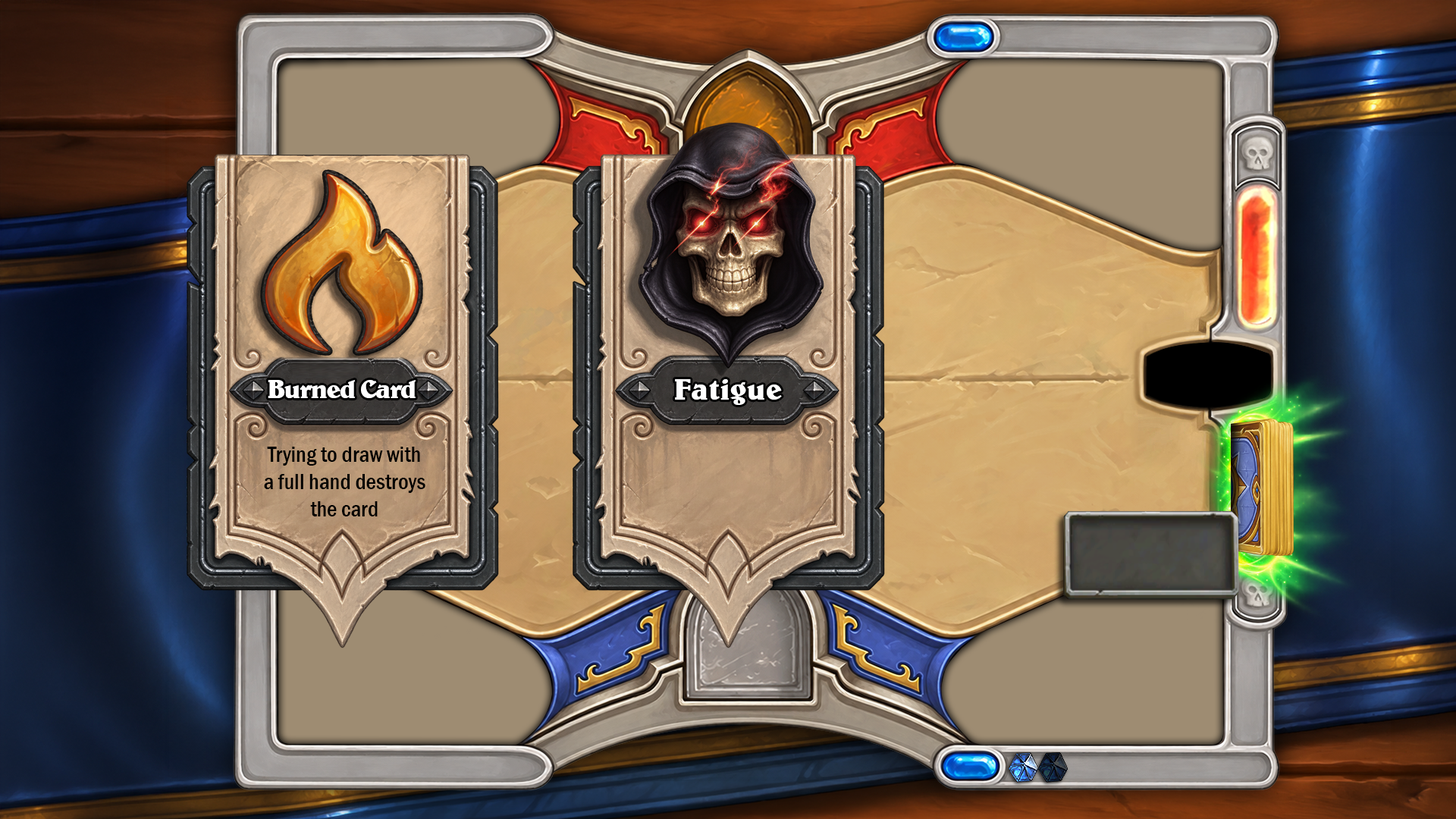
<style>
.page{position:relative;width:1456px;height:819px}
.page>*{position:absolute;margin:0}
.t1{font:26.5px "BelweBT-Bold";letter-spacing:-0.05em;color:#ffffff}
.t2{font:30.3px "BelweBT-Bold";color:#ffffff}
.t3{font:22.7px "FranklinGothic-MediumCond";color:#000000}
</style>
<div class="page">
<p class="t1" style="left:268px;top:380px;width:148px;height:18px">Burned Card</p>
<p class="t2" style="left:675px;top:379px;width:107px;height:26px">Fatigue</p>
<p class="t3" style="left:264px;top:447px;width:161px;height:69px;text-align:center">Trying to draw with<br>a full hand destroys<br>the card</p>
</div>
